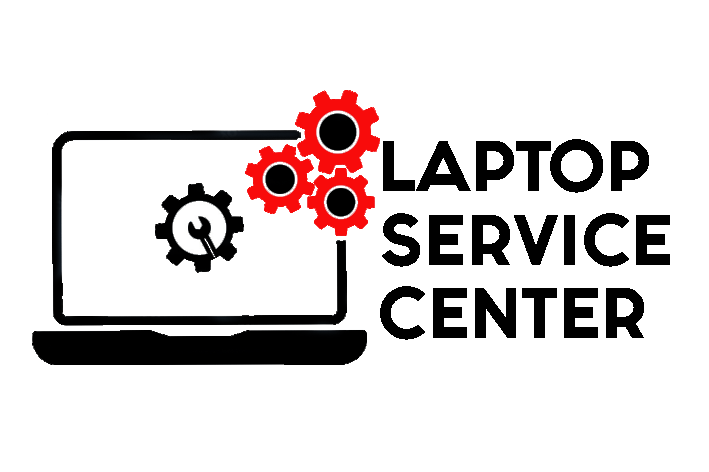
<style>
.page{position:relative;width:709px;height:472px;background:#ffffff}
.page>*{position:absolute;margin:0}
.t1{font:61px "FashionFetishHeavy";color:#000000}
</style>
<div class="page">
<p class="t1" style="left:380px;top:139px;width:290px;height:201px">LAPTOP<br>SERVICE <br>CENTER</p>
</div>
